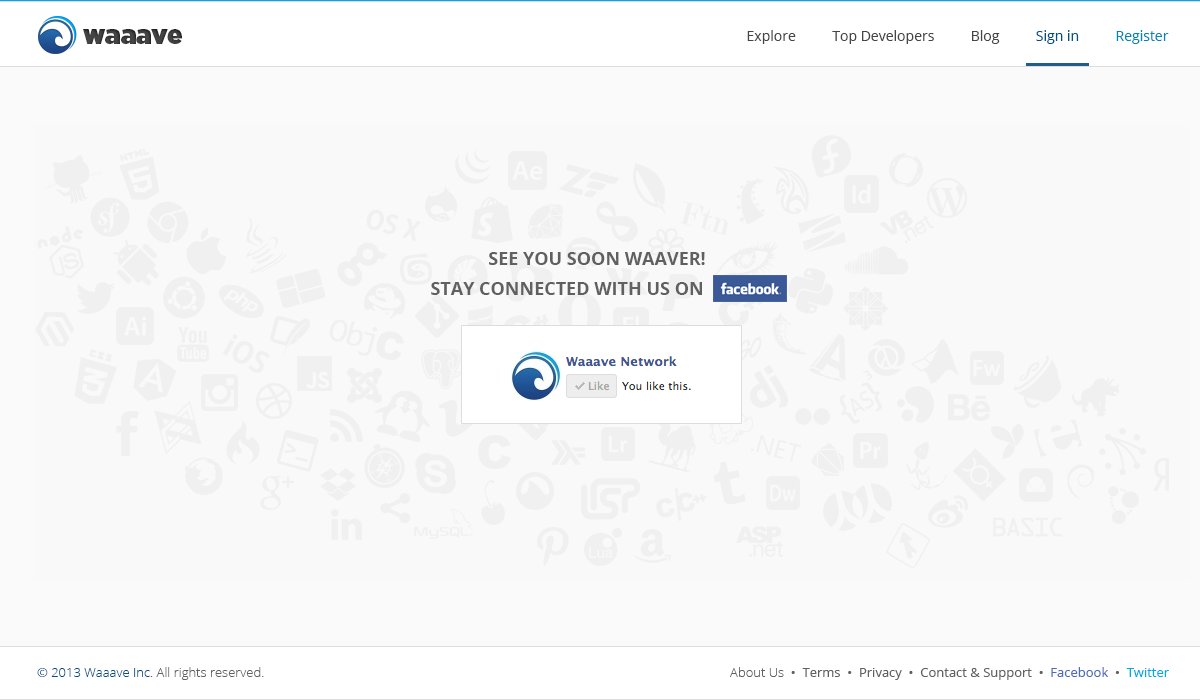
<style>
.page{position:relative;width:1200px;height:700px;background:#f9f9f9}
.page>*{position:absolute;margin:0}
.t1{font:25.9px "Gotham-Ultra";color:#454545}
.t2{font:14px "OpenSans";color:#454545}
.t3{font:14px "OpenSans";color:#005086}
.t4{font:14px "OpenSans";color:#0086b8}
.t5{font:18px "OpenSans-Bold";color:#606060}
.t6{font:13px "OpenSans-Light";color:#606060}
.t7{font:13px "OpenSans-Light";color:#005086}
.t8{font:13px "OpenSans";color:#606060}
.t9{font:13px "OpenSans";color:#4e6dbb}
.t10{font:13px "OpenSans";color:#01abe1}
</style>
<div class="page">
<p class="t1" style="left:83px;top:29px;width:99px;height:15px">waaave</p>
<p class="t2" style="left:747px;top:30px;width:422px;height:14px">Explore          Top Developers          Blog          <span class="t3">Sign in          </span><span class="t4">Register</span></p>
<p class="t5" style="left:489px;top:252px;width:216px;height:13px">SEE YOU SOON WAAVER!</p>
<p class="t5" style="left:431px;top:282px;width:271px;height:13px">STAY CONNECTED WITH US ON</p>
<p class="t6" style="left:37px;top:667px;width:227px;height:13px"><span class="t7">© 2013 Waaave Inc</span>. All rights reserved.</p>
<p class="t8" style="left:730px;top:667px;width:439px;height:13px"><span class="t6">About Us  </span>•  Terms  •  Privacy  •  Contact &amp; Support  •  <span class="t9">Facebook</span>  •  <span class="t10">Twitter</span></p>
</div>
